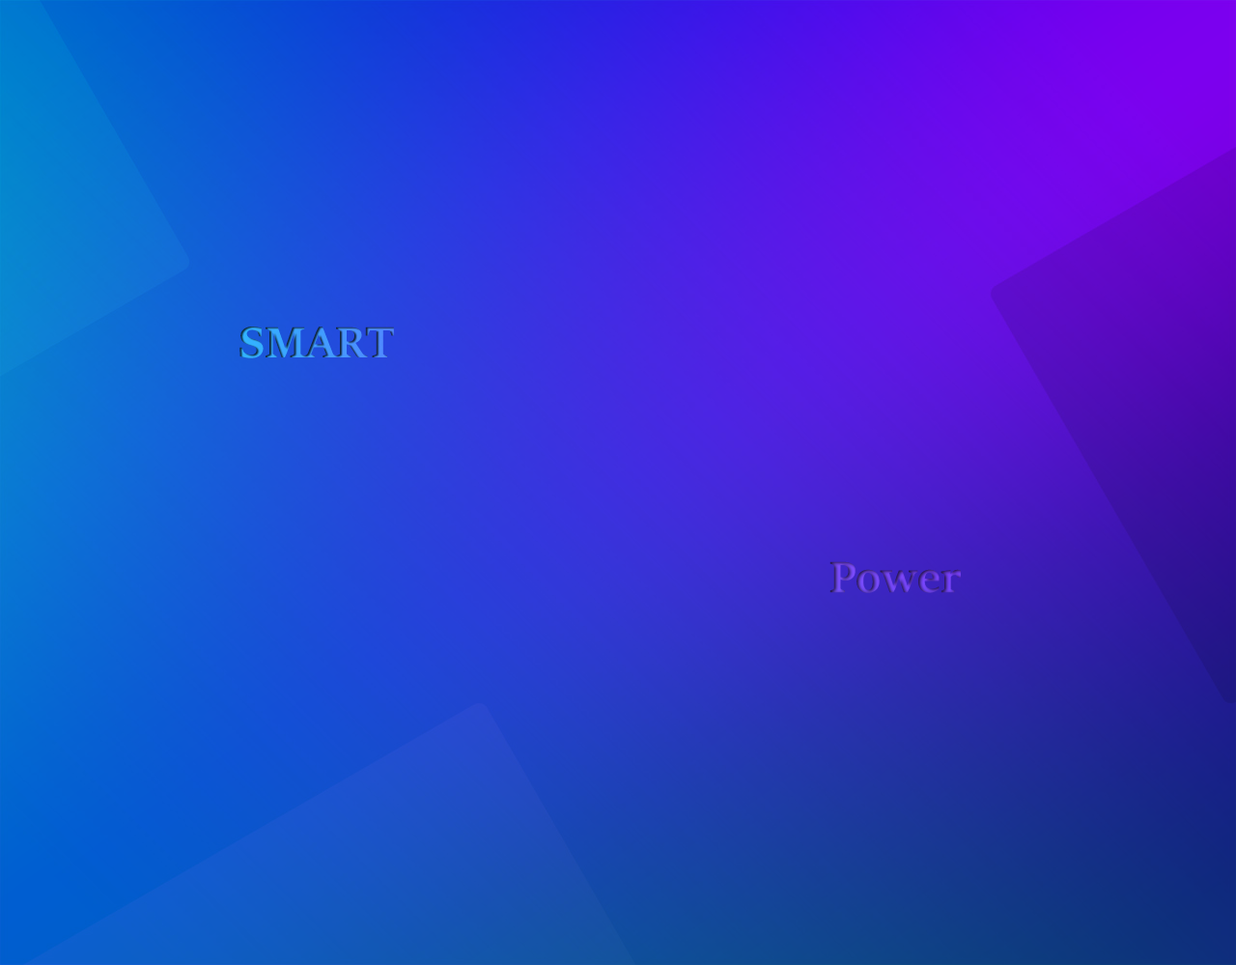
<style>
.page{position:relative;width:1236px;height:965px}
.page>*{position:absolute;margin:0}
.t1{font:48.3px "SitkaHeading-Bold"}
</style>
<div class="page">
<p class="t1" style="left:239px;top:326px;width:155px;height:32px">SMART</p>
<p class="t1" style="left:830px;top:561px;width:131px;height:32px">Power</p>
</div>
